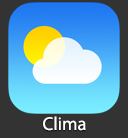
<style>
.page{position:relative;width:128px;height:138px;background:#333333}
.page>*{position:absolute;margin:0}
.t1{font:18.6px "MyriadPro-Regular";color:#ffffff}
</style>
<div class="page">
<p class="t1" style="left:43px;top:116px;width:43px;height:15px">Clima</p>
</div>
